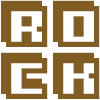
<style>
.page{position:relative;width:100px;height:100px;background:#825d23}
.page>*{position:absolute;margin:0}
.t1{font:82.1px "3Dventure";color:#825d23}
</style>
<div class="page">
<p class="t1" style="left:1px;top:0px;width:99px;height:47px">ro</p>
<p class="t1" style="left:1px;top:52px;width:99px;height:47px">ck</p>
</div>
